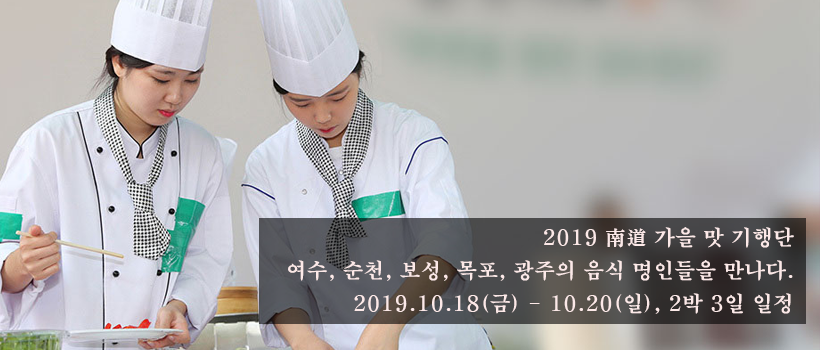
<style>
.page{position:relative;width:820px;height:350px}
.page>*{position:absolute;margin:0}
.t1{font:21px/33px "H2mjrE";color:#fce9e8}
</style>
<div class="page">
<p class="t1" style="left:288px;top:227px;width:506px;height:87px;text-align:right">2019 南道 가을 맛 기행단<br>여수, 순천, 보성, 목포, 광주의 음식 명인들을 만나다.<br>2019.10.18(금) - 10.20(일), 2박 3일 일정</p>
</div>
